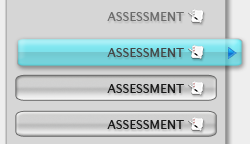
<style>
.page{position:relative;width:250px;height:144px;background:#d6d6d6}
.page>*{position:absolute;margin:0}
.t1{font:12.3px "LucidaSans";letter-spacing:0.006em;color:#6b6b6b}
.t2{font:12.3px "LucidaSans";letter-spacing:0.006em;color:#454545}
.t3{font:12.3px "LucidaSans";letter-spacing:0.006em;color:#191919}
</style>
<div class="page">
<p class="t1" style="left:107px;top:12px;width:77px;height:9px">ASSESSMENT</p>
<p class="t2" style="left:107px;top:48px;width:77px;height:9px">ASSESSMENT</p>
<p class="t3" style="left:107px;top:84px;width:77px;height:9px">ASSESSMENT</p>
<p class="t3" style="left:107px;top:120px;width:77px;height:9px">ASSESSMENT</p>
</div>
